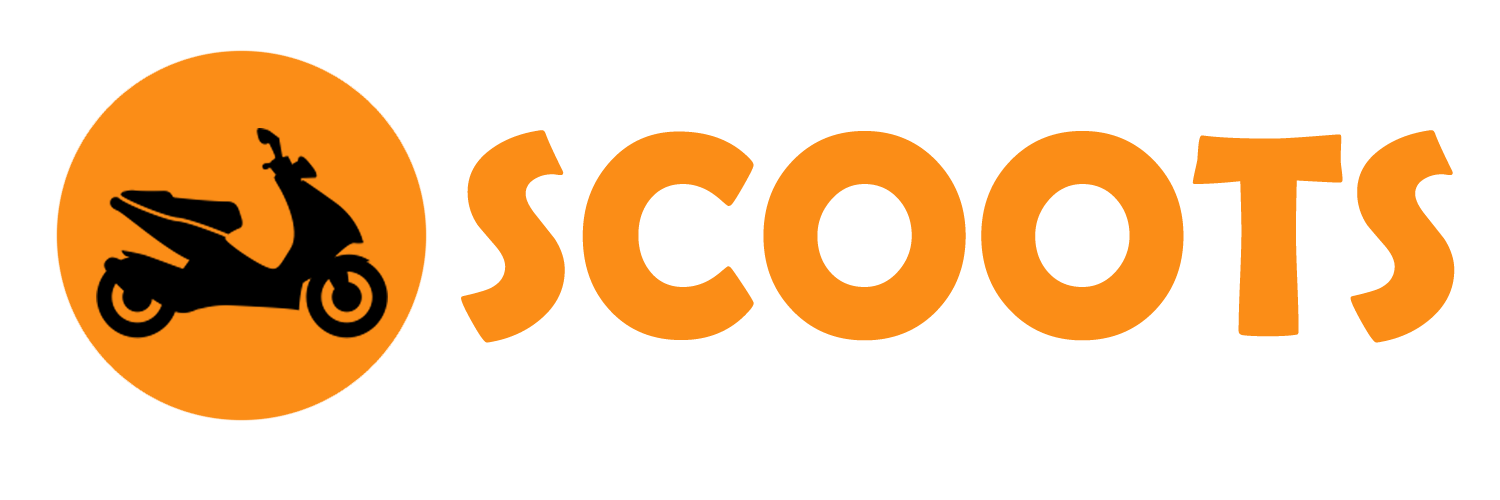
<style>
.page{position:relative;width:1500px;height:500px;background:#ffffff}
.page>*{position:absolute;margin:0}
.t1{font:290px "BerlinSansFBDemi-Bold";color:#fb8d17}
</style>
<div class="page">
<p class="t1" style="left:461px;top:130px;width:994px;height:213px">SCOOTS</p>
</div>
